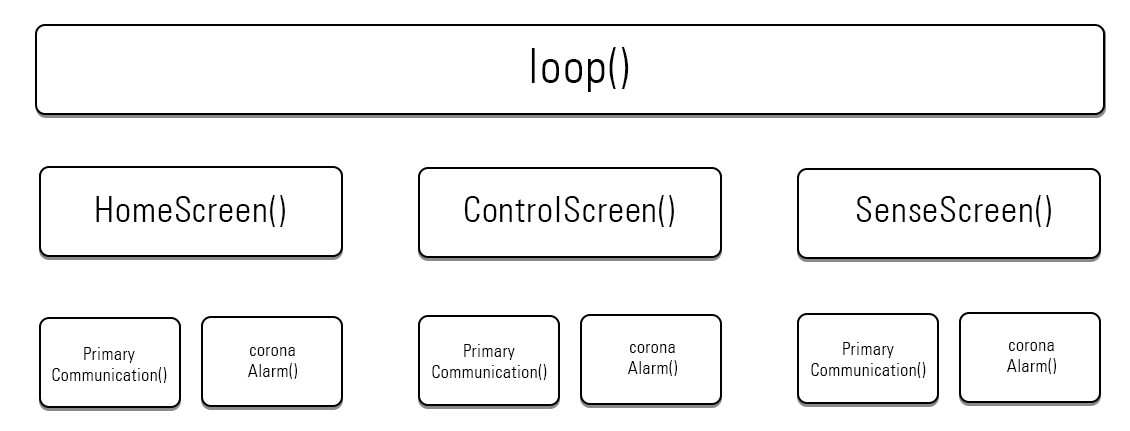
<style>
.page{position:relative;width:1130px;height:431px;background:#ffffff}
.page>*{position:absolute;margin:0}
.t1{font:48px "UniversLT-CondensedLight";letter-spacing:0.025em;color:#000000}
.t2{font:36px "UniversLT-CondensedLight";letter-spacing:0.025em;color:#000000}
.t3{font:18px "UniversLT-CondensedLight";letter-spacing:0.025em;color:#000000}
</style>
<div class="page">
<p class="t1" style="left:531px;top:47px;width:98px;height:45px">loop()</p>
<p class="t2" style="left:96px;top:195px;width:189px;height:32px">HomeScreen()</p>
<p class="t2" style="left:464px;top:195px;width:210px;height:32px">ControlScreen()</p>
<p class="t2" style="left:856px;top:195px;width:195px;height:32px">SenseScreen()</p>
<p class="t3" style="left:811px;top:342px;width:115px;height:36px;text-align:center">Primary<br>Communication()</p>
<p class="t3" style="left:1006px;top:342px;width:51px;height:32px;text-align:center">corona<br>Alarm()</p>
<p class="t3" style="left:52px;top:347px;width:115px;height:36px;text-align:center">Primary<br>Communication()</p>
<p class="t3" style="left:247px;top:347px;width:51px;height:32px;text-align:center">corona<br>Alarm()</p>
<p class="t3" style="left:432px;top:344px;width:115px;height:36px;text-align:center">Primary<br>Communication()</p>
<p class="t3" style="left:627px;top:344px;width:51px;height:32px;text-align:center">corona<br>Alarm()</p>
</div>
